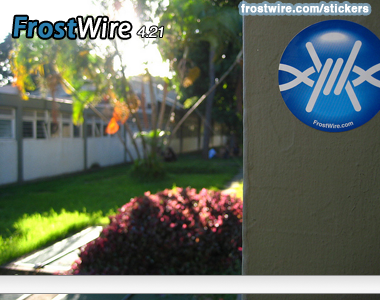
<style>
.page{position:relative;width:380px;height:300px}
.page>*{position:absolute;margin:0}
.t1{font:11px "Helvetica-Bold";letter-spacing:0.03em;color:#ffffff;font-weight:bold}
.t2{font:28.8px "MyriadPro-SemiboldIt";color:#2b7fb0;font-weight:bold}
.t3{font:28.8px "MyriadPro-It";color:#fffeff;font-weight:bold}
.t4{font:14.5px "Helvetica-Oblique";letter-spacing:-0.07em;color:#ffffff;font-weight:bold;scale:1.05 1}
</style>
<div class="page">
<p class="t1" style="left:241px;top:4px;width:128px;height:9px">frostwire.com/stickers</p>
<p class="t2" style="left:13px;top:16px;width:118px;height:22px">Frost<span class="t3">Wire</span></p>
<p class="t4" style="left:137px;top:26px;width:27px;height:11px">4.21</p>
</div>
